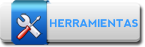
<style>
.page{position:relative;width:145px;height:47px}
.page>*{position:absolute;margin:0}
.t1{font:10.5px "nevis-Bold";color:#3399ff}
</style>
<div class="page">
<p class="t1" style="left:49px;top:19px;width:89px;height:9px">HERRAMIENTAS</p>
</div>
